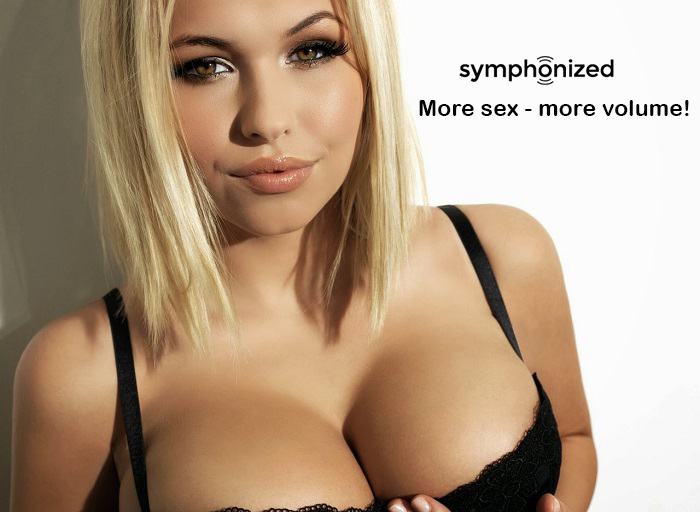
<style>
.page{position:relative;width:700px;height:512px}
.page>*{position:absolute;margin:0}
.t1{font:23.2px "ArialRoundedMTBold";color:#000000}
</style>
<div class="page">
<p class="t1" style="left:419px;top:100px;width:270px;height:16px">More sex - more volume!</p>
</div>
